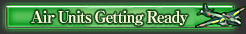
<style>
.page{position:relative;width:246px;height:34px}
.page>*{position:absolute;margin:0}
.t1{font:16px "RyuminPro-ExBold";letter-spacing:-0.08em;color:#ffffdb}
</style>
<div class="page">
<p class="t1" style="left:31px;top:10px;width:157px;height:16px">Air Units Getting Ready</p>
</div>
